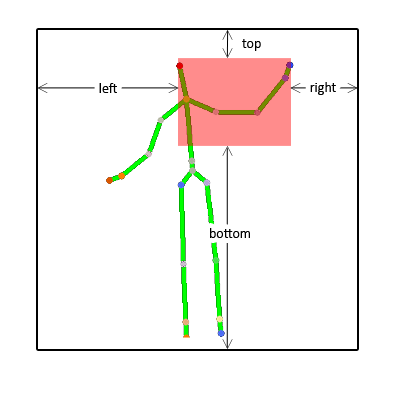
<style>
.page{position:relative;width:400px;height:400px;background:#ffffff}
.page>*{position:absolute;margin:0}
.t1{font:14px "Calibri";color:#000000}
</style>
<div class="page">
<p class="t1" style="left:242px;top:39px;width:19px;height:12px">top</p>
<p class="t1" style="left:99px;top:83px;width:18px;height:10px">left</p>
<p class="t1" style="left:310px;top:82px;width:26px;height:13px">right</p>
<p class="t1" style="left:210px;top:228px;width:40px;height:10px">bottom</p>
</div>
